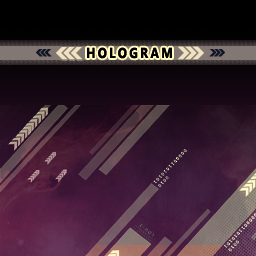
<style>
.page{position:relative;width:256px;height:256px}
.page>*{position:absolute;margin:0}
.t1{font:14.4px "MicrosoftPhagsPa-Bold";letter-spacing:0.2em;color:#000000;text-transform:uppercase;scale:0.83 1}
</style>
<div class="page">
<p class="t1" style="left:87px;top:47px;width:85px;height:12px">Hologram</p>
</div>
